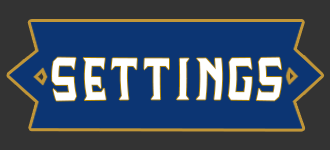
<style>
.page{position:relative;width:330px;height:150px;background:#0c3573}
.page>*{position:absolute;margin:0}
.t1{font:62.5px "Lorde-Havana";letter-spacing:0.1em;color:#ffffff;scale:0.75 1}
</style>
<div class="page">
<p class="t1" style="left:52px;top:57px;width:230px;height:44px">Settings</p>
</div>
